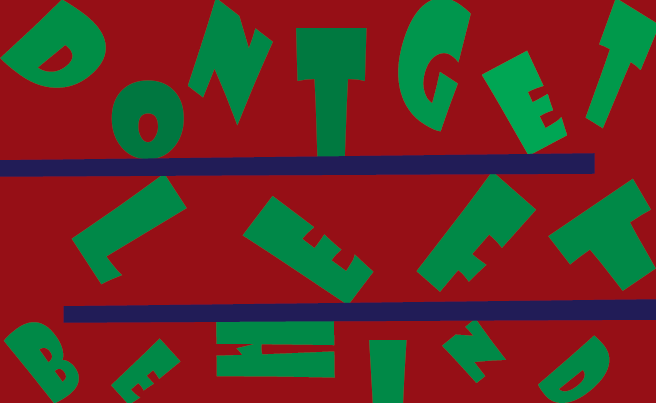
<style>
.page{position:relative;width:656px;height:403px;background:#960f16}
.page>*{position:absolute;margin:0}
.t1{font:114.7px "ShowcardGothic-Reg";color:#008e46}
.t2{font:120.1px "ShowcardGothic-Reg";color:#008747}
.t3{font:159.4px "ShowcardGothic-Reg";color:#00964d;scale:0.64 1}
.t4{font:172.2px "ShowcardGothic-Reg";color:#007940;scale:0.67 1}
.t5{font:124px "ShowcardGothic-Reg";color:#00a654;scale:0.8 1}
.t6{font:98.1px "ShowcardGothic-Reg";color:#007740;scale:1.12 1}
.t7{font:793.3px "ShowcardGothic-Reg";color:#211c57;scale:0.08 1}
.t8{font:150.8px "ShowcardGothic-Reg";color:#008848;scale:0.81 1}
.t9{font:166.3px "ShowcardGothic-Reg";color:#008947;scale:0.68 1}
.t10{font:116.2px "ShowcardGothic-Reg";color:#008947;scale:1.45 1}
.t11{font:168px "ShowcardGothic-Reg";color:#008848;scale:0.57 1}
.t12{font:156.5px "ShowcardGothic-Reg";color:#008947;scale:0.52 1}
.t13{font:67.8px "ShowcardGothic-Reg";color:#008947;scale:1.06 1}
.t14{font:107.1px "ShowcardGothic-Reg";color:#008947;scale:0.66 1}
.t15{font:89.9px "ShowcardGothic-Reg";color:#008947;scale:0.67 1}
.t16{font:85.1px "ShowcardGothic-Reg";color:#008947;scale:1.3 1}
.t17{font:99.4px "ShowcardGothic-Reg";color:#008947;scale:0.6 1}
</style>
<div class="page">
<p class="t1" style="left:0px;top:0px;width:106px;height:88px;rotate:37deg">D</p>
<p class="t2" style="left:188px;top:0px;width:85px;height:126px;rotate:38deg">n</p>
<p class="t3" style="left:398px;top:0px;width:73px;height:132px;rotate:33deg">g</p>
<p class="t4" style="left:296px;top:28px;width:71px;height:129px">t</p>
<p class="t5" style="left:482px;top:50px;width:85px;height:106px;rotate:-28deg">e</p>
<p class="t6" style="left:111px;top:80px;width:73px;height:80px">o</p>
<p class="t7" style="left:0px;top:153px;width:595px;height:24px;rotate:90deg">i</p>
<p class="t8" style="left:71px;top:173px;width:116px;height:112px;rotate:57deg">l</p>
<p class="t9" style="left:416px;top:171px;width:120px;height:121px;rotate:41deg">f</p>
<p class="t10" style="left:548px;top:178px;width:108px;height:113px;rotate:-34deg">t</p>
<p class="t11" style="left:242px;top:196px;width:132px;height:109px;rotate:-53deg">e</p>
<p class="t12" style="left:216px;top:317px;width:119px;height:61px;rotate:89deg">h</p>
<p class="t13" style="left:442px;top:318px;width:64px;height:65px;rotate:-39deg">n</p>
<p class="t14" style="left:3px;top:322px;width:76px;height:82px;rotate:-37deg">b</p>
<p class="t15" style="left:111px;top:338px;width:70px;height:67px;rotate:48deg">e</p>
<p class="t16" style="left:369px;top:340px;width:38px;height:64px">i</p>
<p class="t17" style="left:538px;top:335px;width:72px;height:68px;rotate:51deg">d</p>
</div>
